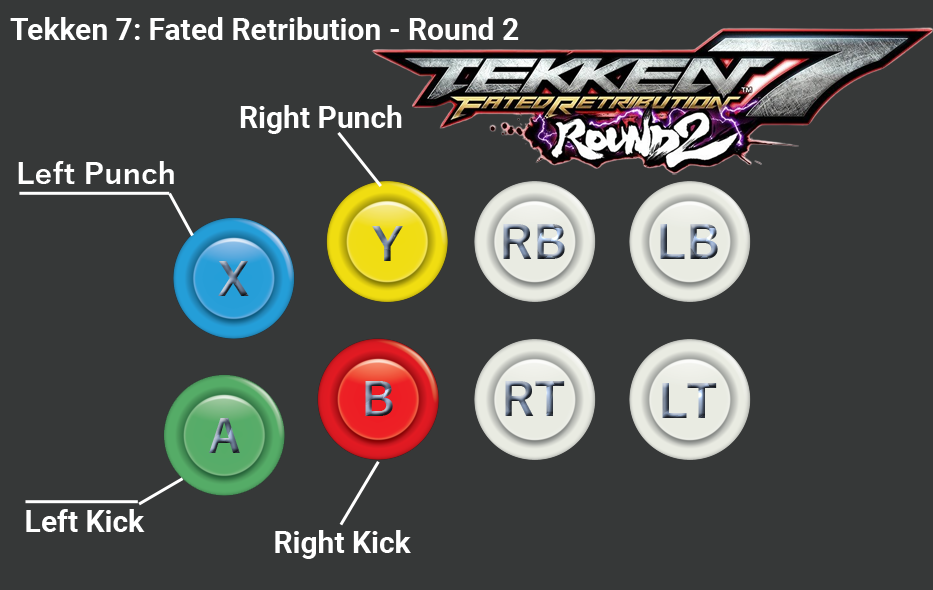
<style>
.page{position:relative;width:933px;height:590px;background:#363838}
.page>*{position:absolute;margin:0}
.t1{font:30px "Roboto-Bold";color:#ffffff}
.t2{font:30px "YuGothic-Bold";color:#ffffff}
</style>
<div class="page">
<p class="t1" style="left:10px;top:17px;width:509px;height:23px">Tekken 7: Fated Retribution - Round 2</p>
<p class="t1" style="left:240px;top:105px;width:162px;height:29px">Right Punch</p>
<p class="t2" style="left:18px;top:161px;width:156px;height:23px">Left Punch</p>
<p class="t1" style="left:26px;top:509px;width:119px;height:23px">Left Kick</p>
<p class="t1" style="left:275px;top:530px;width:136px;height:29px">Right Kick</p>
</div>
